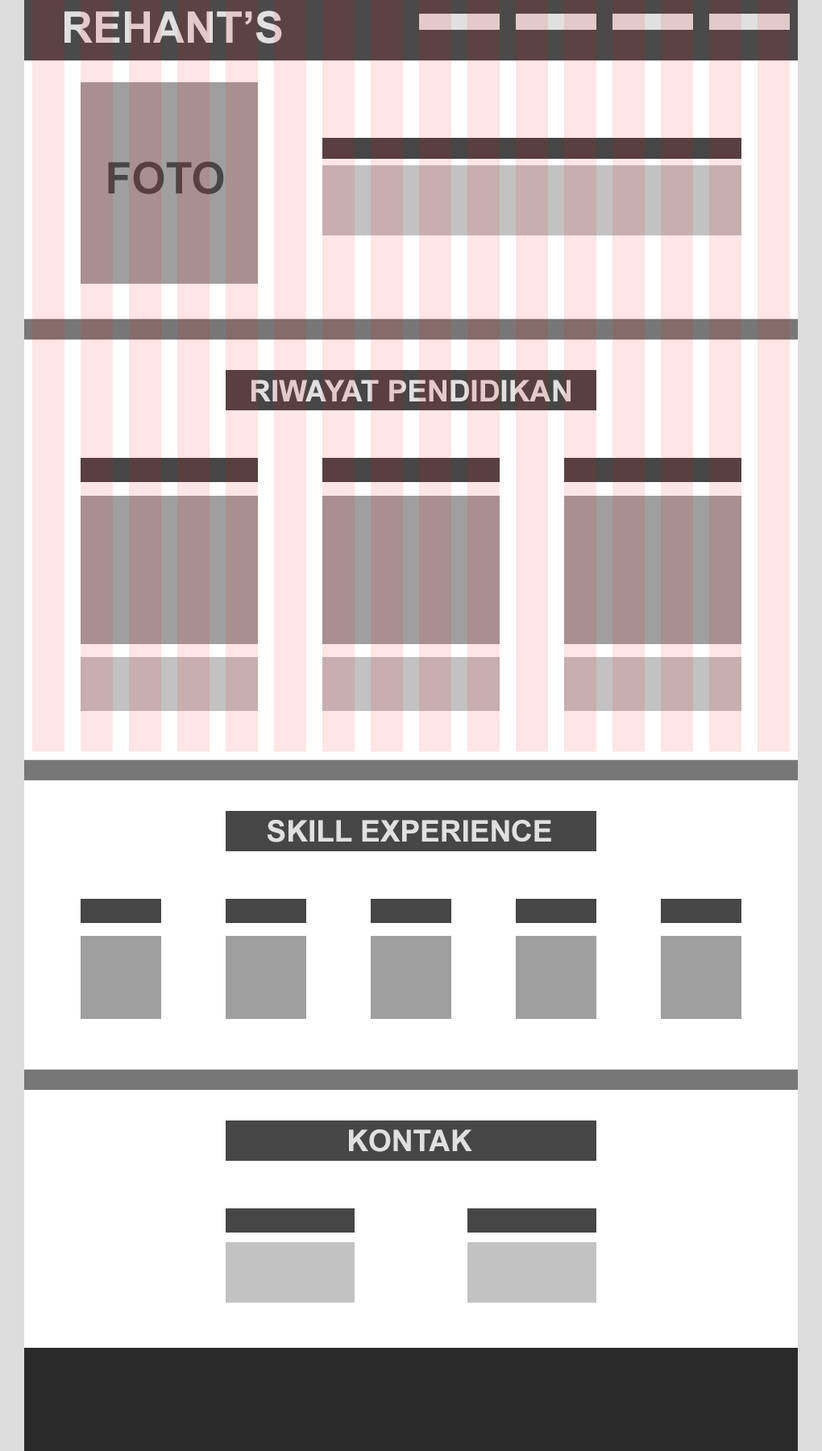
<style>
.page{position:relative;width:822px;height:1451px;background:#ffffff}
.page>*{position:absolute;margin:0}
.t1{font:43.5px "Arial-BoldMT";color:#e0e0e0}
.t2{font:43.5px "Arial-BoldMT";color:#464646}
.t3{font:29.8px "Arial-BoldMT";color:#e0e0e0}
</style>
<div class="page">
<p class="t1" style="left:64px;top:10px;width:218px;height:34px">REHANT’S</p>
<p class="t2" style="left:108px;top:161px;width:116px;height:33px">FOTO</p>
<p class="t3" style="left:251px;top:380px;width:320px;height:21px">RIWAYAT PENDIDIKAN</p>
<p class="t3" style="left:267px;top:820px;width:284px;height:22px">SKILL EXPERIENCE</p>
<p class="t3" style="left:349px;top:1129px;width:123px;height:23px">KONTAK</p>
</div>
